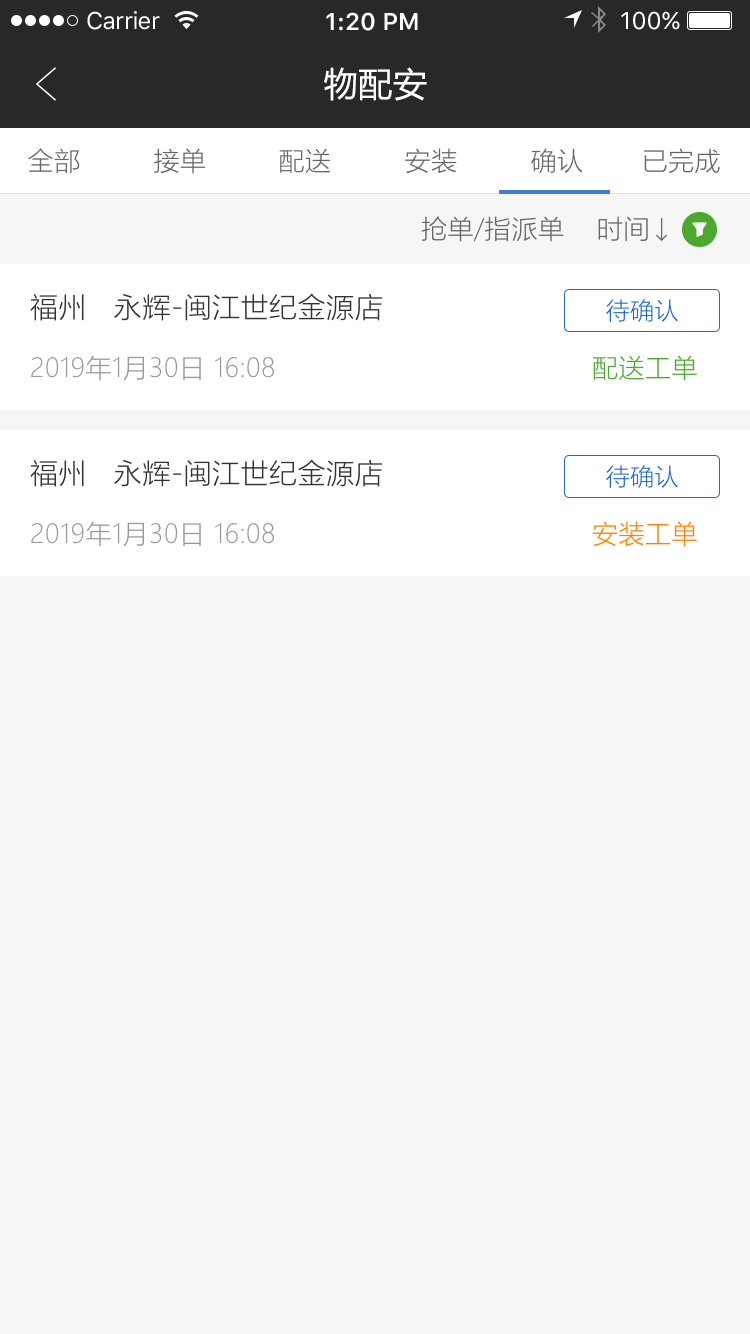
<style>
.page{position:relative;width:750px;height:1334px;background:#f6f6f6}
.page>*{position:absolute;margin:0}
.t1{font:24px "SFUIText-Regular";letter-spacing:-0.025em;color:#ffffff}
.t2{font:24px "SFUIText-Semibold";color:#ffffff}
.t3{font:24px "SFUIText-Regular";color:#ffffff}
.t4{font:34px "MicrosoftYaHei";letter-spacing:0.02em;color:#ffffff}
.t5{font:26px "MicrosoftYaHeiLight";letter-spacing:0.02em;color:#666666}
.t6{font:28px "MicrosoftYaHeiLight";letter-spacing:0.02em;color:#333333}
.t7{font:24px "MicrosoftYaHeiLight";letter-spacing:0.02em;color:#2269d4}
.t8{font:26px "MicrosoftYaHeiLight";letter-spacing:0.02em;color:#999999}
.t9{font:26px "MicrosoftYaHeiLight";letter-spacing:0.02em;color:#4baa2e}
.t10{font:26px "MicrosoftYaHeiLight";letter-spacing:0.02em;color:#ff8100}
</style>
<div class="page">
<p class="t1" style="left:87px;top:11px;width:73px;height:19px">Carrier</p>
<p class="t2" style="left:326px;top:12px;width:92px;height:19px">1:20 PM</p>
<p class="t3" style="left:621px;top:11px;width:59px;height:19px">100%</p>
<p class="t4" style="left:324px;top:67px;width:103px;height:34px">物配安</p>
<p class="t5" style="left:28px;top:148px;width:52px;height:26px">全部</p>
<p class="t5" style="left:154px;top:148px;width:52px;height:26px">接单</p>
<p class="t5" style="left:279px;top:148px;width:52px;height:25px">配送</p>
<p class="t5" style="left:405px;top:148px;width:52px;height:26px">安装</p>
<p class="t5" style="left:531px;top:148px;width:52px;height:25px">确认</p>
<p class="t5" style="left:644px;top:148px;width:76px;height:25px">已完成</p>
<p class="t5" style="left:421px;top:216px;width:143px;height:26px">抢单/指派单</p>
<p class="t5" style="left:598px;top:216px;width:50px;height:26px">时间</p>
<p class="t6" style="left:30px;top:293px;width:353px;height:28px">福州   永辉-闽江世纪金源店</p>
<p class="t7" style="left:606px;top:299px;width:72px;height:23px">待确认</p>
<p class="t8" style="left:31px;top:355px;width:243px;height:26px">2019年1月30日 16:08</p>
<p class="t9" style="left:593px;top:355px;width:104px;height:26px">配送工单</p>
<p class="t6" style="left:30px;top:459px;width:353px;height:28px">福州   永辉-闽江世纪金源店</p>
<p class="t7" style="left:606px;top:465px;width:72px;height:23px">待确认</p>
<p class="t8" style="left:31px;top:521px;width:243px;height:26px">2019年1月30日 16:08</p>
<p class="t10" style="left:592px;top:521px;width:105px;height:26px">安装工单</p>
</div>
